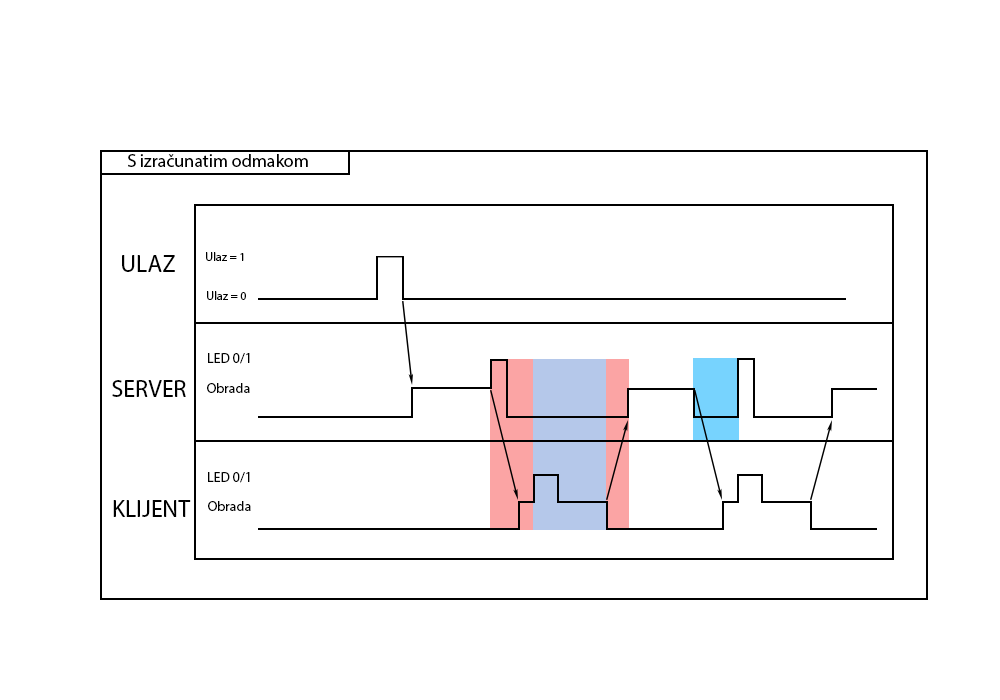
<style>
.page{position:relative;width:1000px;height:700px;background:#ffffff}
.page>*{position:absolute;margin:0}
.t1{font:18px "MyriadPro-Regular";color:#000000}
.t2{font:24px "MyriadPro-Regular";color:#000000}
.t3{font:12px "MyriadPro-Regular";color:#000000}
.t4{font:14px "MyriadPro-Regular";color:#000000}
</style>
<div class="page">
<p class="t1" style="left:128px;top:154px;width:180px;height:13px">S izračunatim odmakom</p>
<p class="t2" style="left:122px;top:255px;width:53px;height:17px">ULAZ</p>
<p class="t3" style="left:206px;top:252px;width:38px;height:9px">Ulaz = 1</p>
<p class="t3" style="left:207px;top:291px;width:39px;height:9px">Ulaz = 0</p>
<p class="t4" style="left:208px;top:353px;width:42px;height:11px">LED 0/1</p>
<p class="t2" style="left:112px;top:380px;width:74px;height:17px">SERVER</p>
<p class="t4" style="left:207px;top:383px;width:43px;height:10px">Obrada</p>
<p class="t4" style="left:208px;top:472px;width:42px;height:11px">LED 0/1</p>
<p class="t2" style="left:113px;top:500px;width:78px;height:17px">KLIJENT</p>
<p class="t4" style="left:208px;top:501px;width:43px;height:10px">Obrada</p>
</div>
